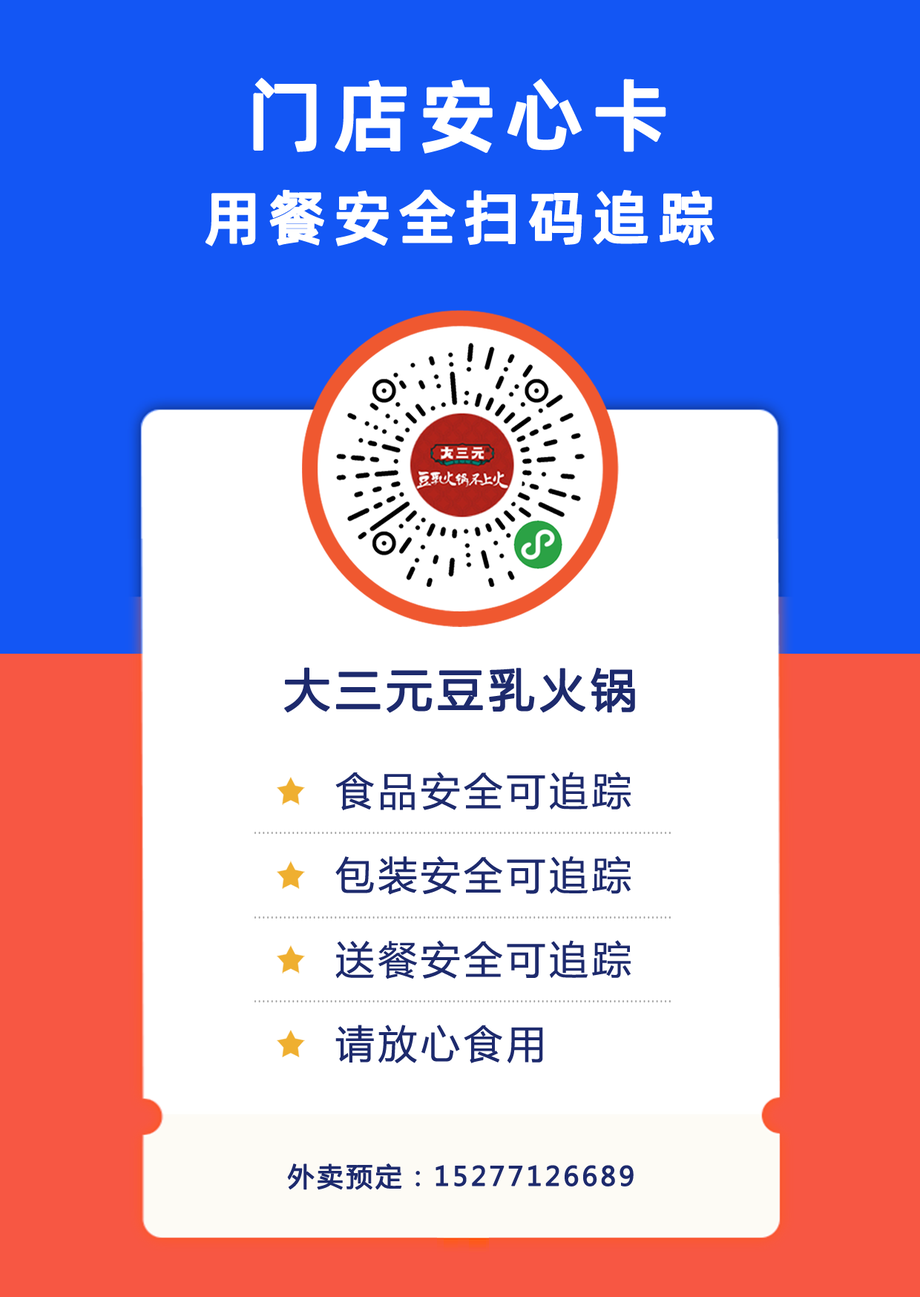
<style>
.page{position:relative;width:920px;height:1297px;background:#ffffff}
.page>*{position:absolute;margin:0}
.t1{font:77.8px "AlibabaPuHuiTiM";letter-spacing:0.1em;color:#ffffff;font-weight:bold}
.t2{font:58.3px "AlibabaPuHuiTiM";letter-spacing:0.1em;color:#ffffff;font-weight:bold}
.t3{font:45.4px "MicrosoftYaHei";letter-spacing:0.1em;color:#1d2a6d;font-weight:bold}
.t4{font:38.9px "MicrosoftYaHei";letter-spacing:0.1em;color:#1d2a6d}
.t5{font:25.9px "MicrosoftYaHei";letter-spacing:0.1em;color:#1d2a6d;font-weight:bold}
</style>
<div class="page">
<p class="t1" style="left:253px;top:77px;width:413px;height:77px">门店安心卡</p>
<p class="t2" style="left:205px;top:189px;width:509px;height:57px">用餐安全扫码追踪</p>
<p class="t3" style="left:284px;top:667px;width:351px;height:46px">大三元豆乳火锅</p>
<p class="t4" style="left:335px;top:771px;width:295px;height:39px">食品安全可追踪</p>
<p class="t4" style="left:335px;top:855px;width:295px;height:40px">包装安全可追踪</p>
<p class="t4" style="left:335px;top:940px;width:295px;height:39px">送餐安全可追踪</p>
<p class="t4" style="left:335px;top:1024px;width:208px;height:39px">请放心食用</p>
<p class="t5" style="left:287px;top:1163px;width:346px;height:27px">外卖预定：15277126689</p>
</div>
